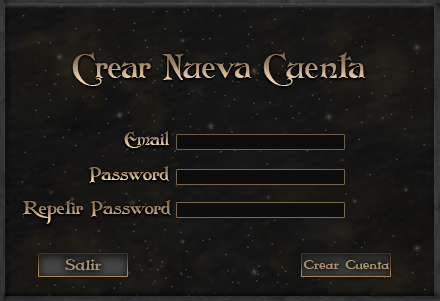
<style>
.page{position:relative;width:440px;height:301px}
.page>*{position:absolute;margin:0}
.t1{font:32.4px "Folkard"}
.t2{font:18.7px "Folkard"}
.t3{font:16.3px "Immortal";color:#ad9573}
.t4{font:13.2px "Immortal";color:#ad9573}
</style>
<div class="page">
<p class="t1" style="left:72px;top:52px;width:294px;height:34px">Crear Nueva Cuenta</p>
<p class="t2" style="left:124px;top:131px;width:45px;height:17px">Email</p>
<p class="t2" style="left:88px;top:166px;width:81px;height:17px">Password</p>
<p class="t2" style="left:22px;top:200px;width:149px;height:24px">Repetir Password</p>
<p class="t3" style="left:65px;top:259px;width:37px;height:12px">Salir</p>
<p class="t4" style="left:303px;top:260px;width:87px;height:10px">Crear Cuenta</p>
</div>
